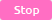
<style>
.page{position:relative;width:52px;height:20px;background:#ff6ec3}
.page>*{position:absolute;margin:0}
.t1{font:12px "Ubuntu-Medium";color:#ffffff}
</style>
<div class="page">
<p class="t1" style="left:14px;top:6px;width:26px;height:10px">Stop</p>
</div>
